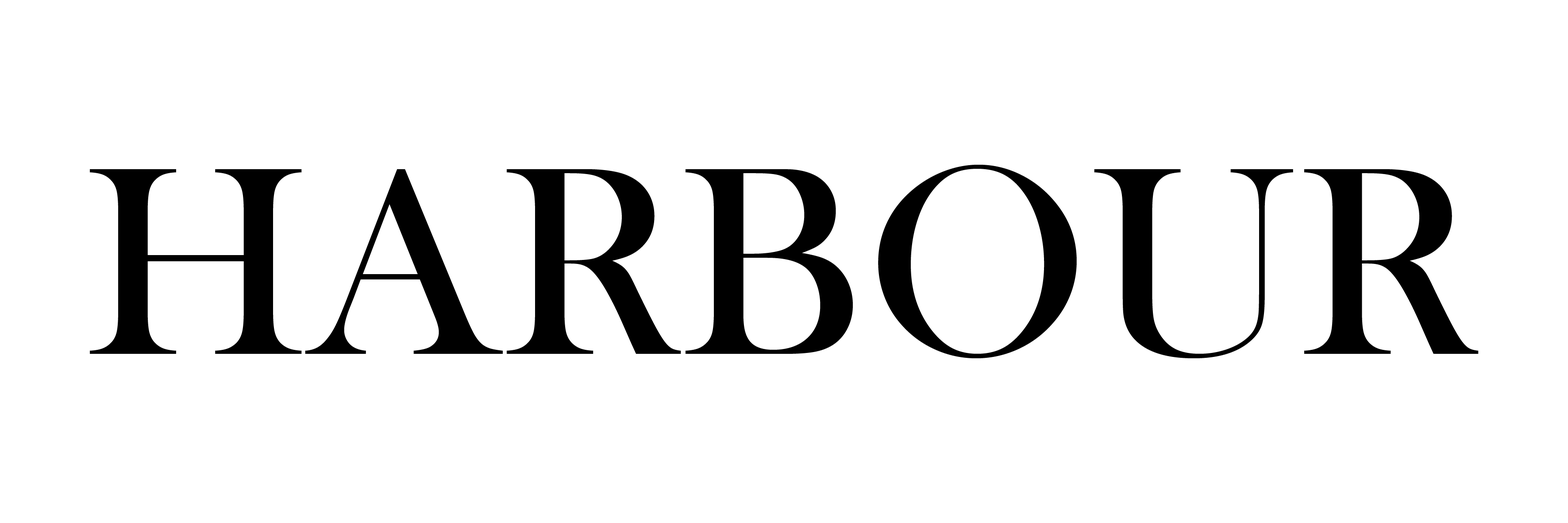
<style>
.page{position:relative;width:1568px;height:523px;background:#ffffff}
.page>*{position:absolute;margin:0}
.t1{font:276.6px "BaskOldFace";color:#000000}
</style>
<div class="page">
<p class="t1" style="left:90px;top:165px;width:1389px;height:193px">HARBOUR</p>
</div>
